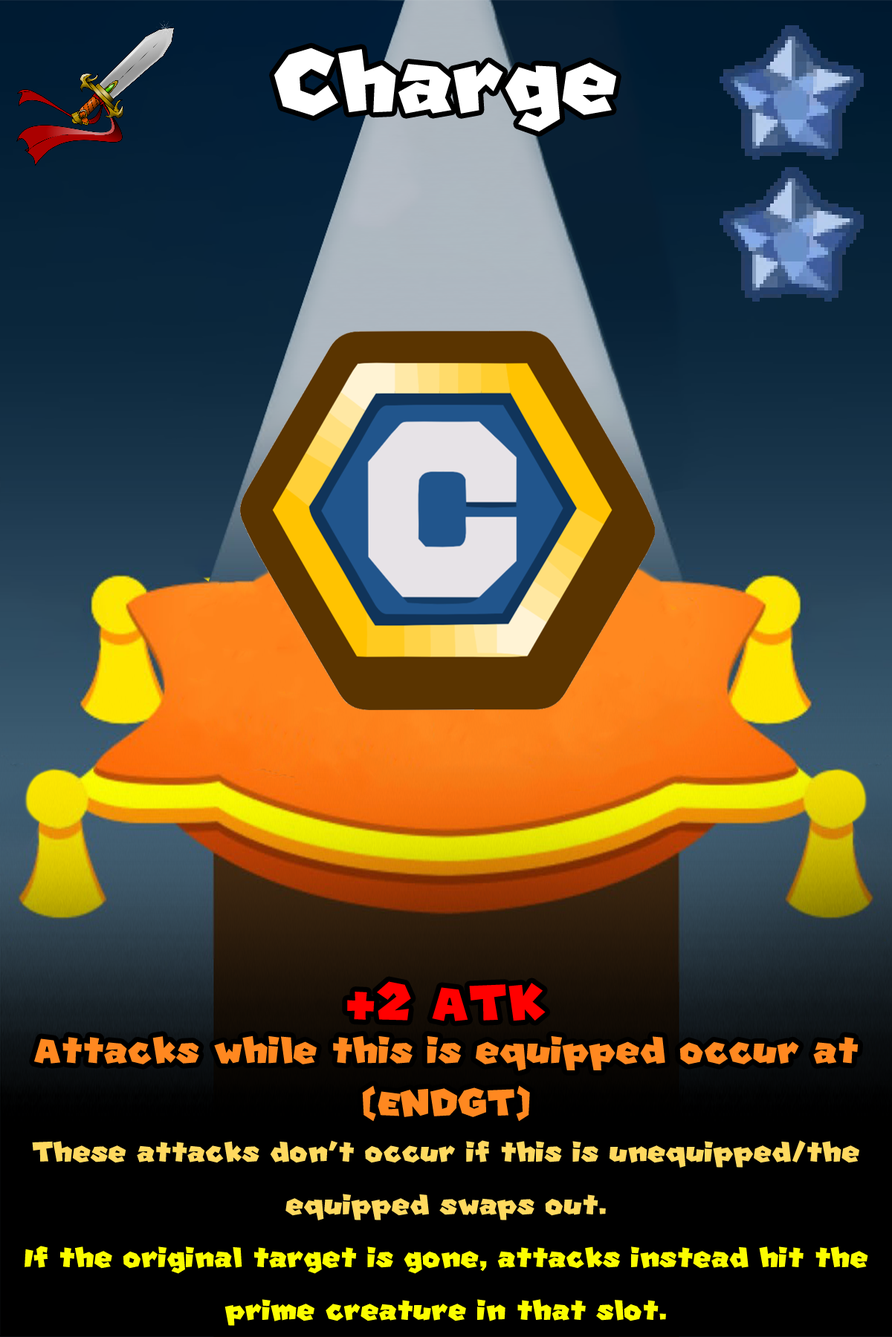
<style>
.page{position:relative;width:892px;height:1337px}
.page>*{position:absolute;margin:0}
.t1{font:206.6px "SuperMario";color:#ffffff}
.t2{font:66.9px/52.8px "SuperMario";color:#fbfd01}
.t3{font:120.4px/52.8px "SuperMario";color:#ff0000}
.t4{font:88.4px/52.8px "SuperMario";color:#ff8820}
.t5{font:66.9px/52.8px "SuperMario";color:#ffd95f}
</style>
<div class="page">
<p class="t1" style="left:274px;top:48px;width:342px;height:84px">Charge</p>
<p class="t2" style="left:25px;top:982px;width:843px;height:344px;text-align:center"><span class="t3">+2 ATK<br></span><span class="t4">Attacks while this is equipped occur at (ENDGT) <br></span><span class="t5">These attacks don't occur if this is unequipped/the equipped swaps out.<br></span>If the original target is gone, attacks instead hit the prime creature in that slot.</p>
</div>
